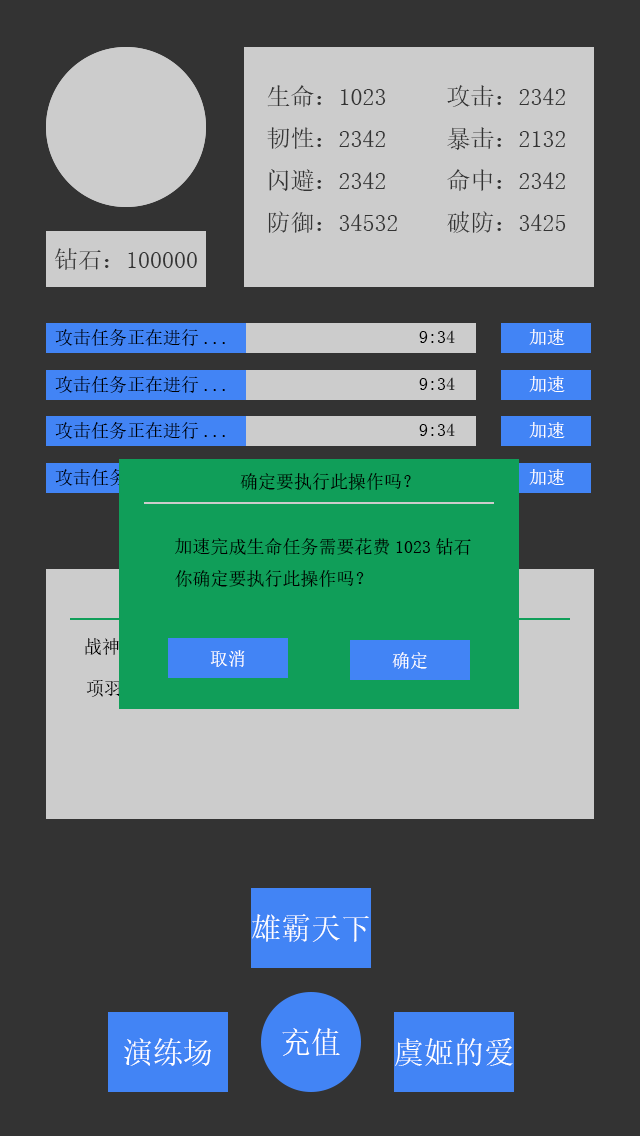
<style>
.page{position:relative;width:640px;height:1136px;background:#333333}
.page>*{position:absolute;margin:0}
.t1{font:24px "SimSun";color:#333333}
.t2{font:18px "SimSun";color:#000000}
.t3{font:18px "SimSun";color:#fefefe}
.t4{font:18px "SimSun";color:#ffffff}
.t5{font:18px "SimSun"}
.t6{font:30px "SimSun";color:#ffffff}
</style>
<div class="page">
<p class="t1" style="left:267px;top:85px;width:299px;height:148px">生命：1023  攻击：2342<br>韧性：2342  暴击：2132<br>闪避：2342  命中：2342<br>防御：34532  破防：3425</p>
<p class="t1" style="left:55px;top:248px;width:142px;height:22px">钻石：100000</p>
<p class="t2" style="left:55px;top:329px;width:170px;height:17px">攻击任务正在进行...</p>
<p class="t3" style="left:529px;top:329px;width:36px;height:16px">加速</p>
<p class="t2" style="left:419px;top:330px;width:36px;height:13px">9:34</p>
<p class="t2" style="left:55px;top:376px;width:170px;height:17px">攻击任务正在进行...</p>
<p class="t2" style="left:419px;top:377px;width:36px;height:13px">9:34</p>
<p class="t4" style="left:529px;top:376px;width:36px;height:16px">加速</p>
<p class="t2" style="left:55px;top:422px;width:170px;height:17px">攻击任务正在进行...</p>
<p class="t2" style="left:419px;top:423px;width:36px;height:13px">9:34</p>
<p class="t4" style="left:529px;top:422px;width:36px;height:16px">加速</p>
<p class="t5" style="left:55px;top:469px;width:170px;height:17px">攻击任务正在进行...</p>
<p class="t2" style="left:240px;top:473px;width:171px;height:17px">确定要执行此操作吗？</p>
<p class="t4" style="left:529px;top:469px;width:36px;height:16px">加速</p>
<p class="t2" style="left:175px;top:538px;width:296px;height:49px">加速完成生命任务需要花费1023钻石<br>你确定要执行此操作吗？</p>
<p class="t4" style="left:210px;top:650px;width:35px;height:17px">取消</p>
<p class="t4" style="left:392px;top:652px;width:35px;height:17px">确定</p>
<p class="t6" style="left:252px;top:914px;width:117px;height:28px">雄霸天下</p>
<p class="t6" style="left:124px;top:1038px;width:87px;height:28px">演练场</p>
<p class="t6" style="left:282px;top:1028px;width:58px;height:28px">充值</p>
<p class="t6" style="left:395px;top:1038px;width:118px;height:28px">虞姬的爱</p>
</div>
